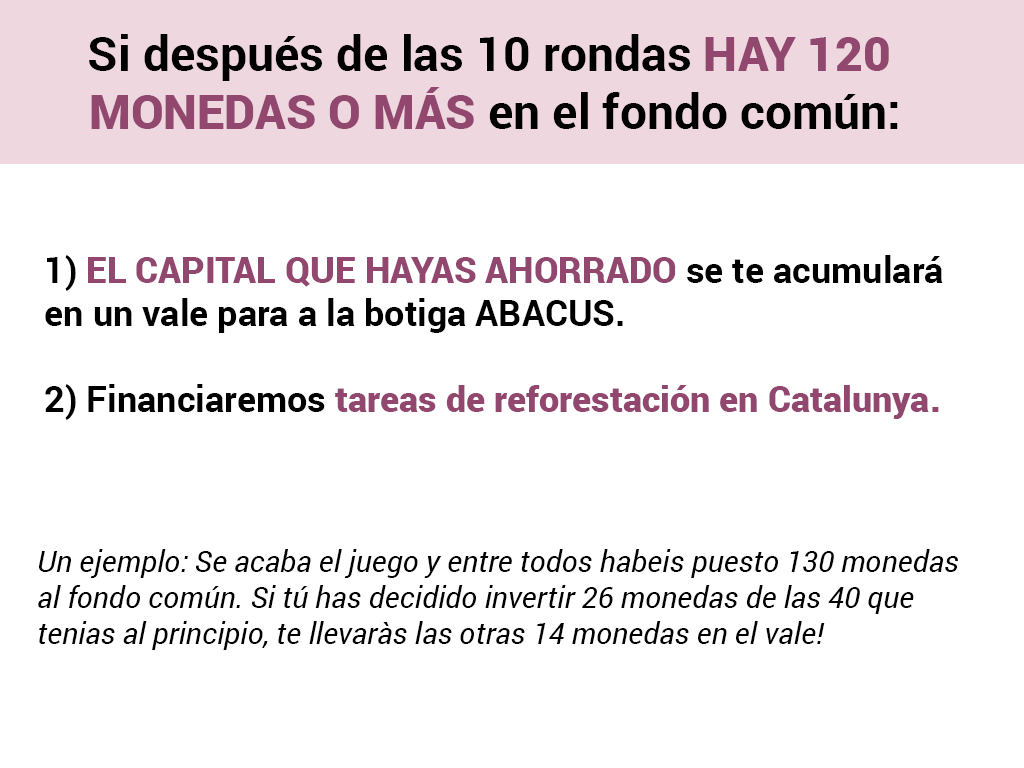
<style>
.page{position:relative;width:1024px;height:768px;background:#ffffff}
.page>*{position:absolute;margin:0}
.t1{font:48px "Roboto-Bold";color:#000000}
.t2{font:48px "Roboto-Black";color:#92476e}
.t3{font:36px "Roboto-Bold";color:#000000}
.t4{font:36px "Roboto-Black";color:#92476e}
.t5{font:30px "Roboto-Italic";color:#000000}
</style>
<div class="page">
<p class="t1" style="left:89px;top:34px;width:809px;height:95px;text-align:center">Si después de las 10 rondas <span class="t2">HAY 120 <br>MONEDAS O MÁS </span>en el fondo común:</p>
<p class="t3" style="left:45px;top:255px;width:898px;height:165px">1) <span class="t4">EL CAPITAL QUE HAYAS AHORRADO </span>se te acumulará<br>en un vale para a la botiga ABACUS.<br><br>2) Financiaremos <span class="t4">tareas de reforestación en Catalunya.</span></p>
<p class="t5" style="left:38px;top:549px;width:920px;height:101px">Un ejemplo: Se acaba el juego y entre todos habeis puesto 130 monedas<br>al fondo común. Si tú has decidido invertir 26 monedas de las 40 que <br>tenias al principio, te llevaràs las otras 14 monedas en el vale!</p>
</div>
